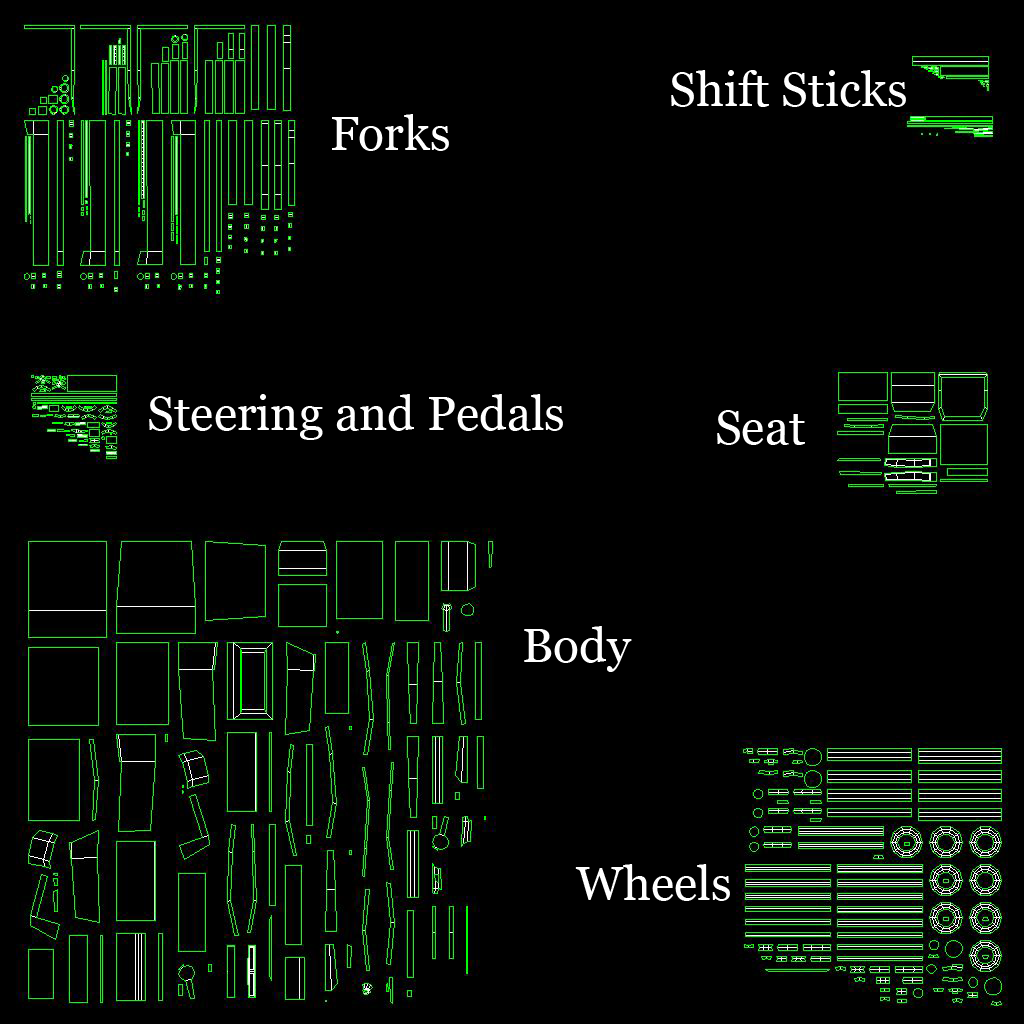
<style>
.page{position:relative;width:1024px;height:1024px;background:#000000}
.page>*{position:absolute;margin:0}
.t1{font:48px "Georgia";color:#ffffff}
</style>
<div class="page">
<p class="t1" style="left:671px;top:70px;width:235px;height:37px">Shift Sticks</p>
<p class="t1" style="left:332px;top:114px;width:117px;height:37px">Forks</p>
<p class="t1" style="left:149px;top:394px;width:414px;height:46px">Steering and Pedals</p>
<p class="t1" style="left:717px;top:410px;width:88px;height:35px">Seat</p>
<p class="t1" style="left:524px;top:626px;width:108px;height:46px">Body</p>
<p class="t1" style="left:575px;top:864px;width:155px;height:37px">Wheels</p>
</div>
